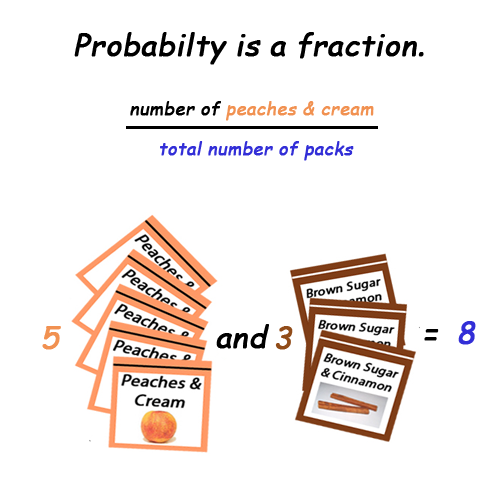
<style>
.page{position:relative;width:500px;height:500px;background:#ffffff}
.page>*{position:absolute;margin:0}
.t1{font:30px "ComicSansMS";color:#000000;font-weight:bold;font-style:italic}
.t2{font:18px "ComicSansMS";color:#f19151;font-weight:bold;font-style:italic}
.t3{font:18px "ComicSansMS";color:#000000;font-weight:bold;font-style:italic}
.t4{font:18px "ComicSansMS";color:#322ed7;font-weight:bold;font-style:italic}
.t5{font:30px "ComicSansMS";color:#f19151;font-weight:bold;font-style:italic}
.t6{font:30px "ComicSansMS";color:#914c19;font-weight:bold;font-style:italic}
.t7{font:30px "ComicSansMS";color:#322ed7;font-weight:bold;font-style:italic}
</style>
<div class="page">
<p class="t1" style="left:74px;top:32px;width:350px;height:33px">Probabilty is a fraction.</p>
<p class="t2" style="left:130px;top:101px;width:244px;height:20px"><span class="t3">number of </span>peaches &amp; cream</p>
<p class="t4" style="left:160px;top:141px;width:194px;height:20px">total number of packs</p>
<p class="t5" style="left:42px;top:326px;width:19px;height:24px">5</p>
<p class="t1" style="left:216px;top:324px;width:53px;height:25px">and</p>
<p class="t6" style="left:275px;top:326px;width:18px;height:24px">3</p>
<p class="t1" style="left:424px;top:321px;width:52px;height:24px">=   <span class="t7">8</span></p>
</div>
